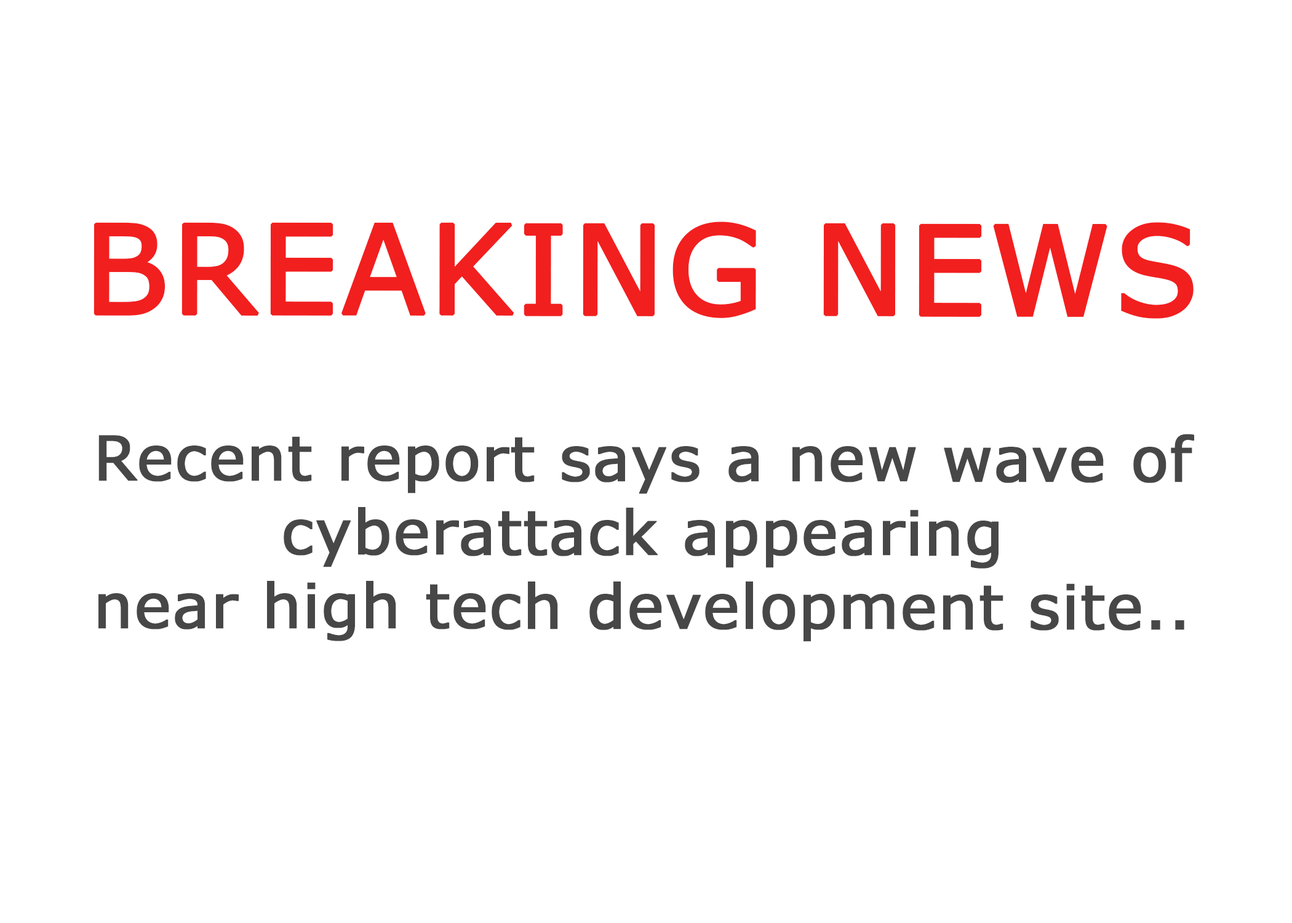
<style>
.page{position:relative;width:1292px;height:923px;background:#ffffff}
.page>*{position:absolute;margin:0}
.t1{font:61.5px "MSReferenceSansSerif";color:#474747;font-weight:bold}
.t2{font:123.1px "MSReferenceSansSerif";color:#f21f1f;font-weight:bold}
</style>
<div class="page">
<p class="t1" style="left:94px;top:221px;width:1100px;height:421px;text-align:center"><span class="t2">BREAKING NEWS<br><br></span>Recent report says a new wave of cyberattack appearing    <br>near high tech development site..</p>
</div>
